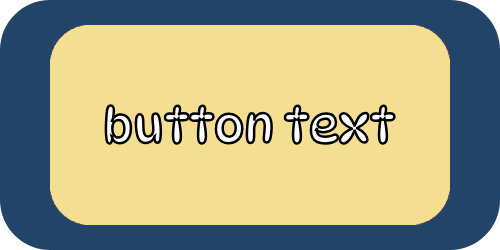
<style>
.page{position:relative;width:500px;height:250px;background:#f3de91}
.page>*{position:absolute;margin:0}
.t1{font:48px "DynaPuff-Regular"}
</style>
<div class="page">
<p class="t1" style="left:99px;top:99px;width:302px;height:51px">button text</p>
</div>
